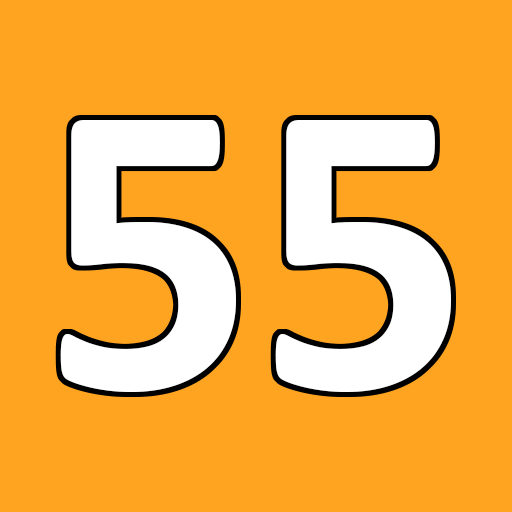
<style>
.page{position:relative;width:512px;height:512px;background:#ffa420}
.page>*{position:absolute;margin:0}
.t1{font:423.3px "Calibri-Bold";color:#ffffff}
</style>
<div class="page">
<p class="t1" style="left:60px;top:120px;width:391px;height:272px">55</p>
</div>
